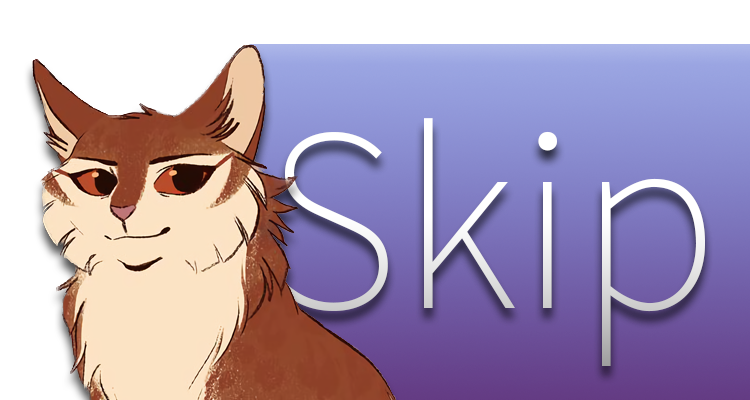
<style>
.page{position:relative;width:750px;height:400px;background:#ffffff}
.page>*{position:absolute;margin:0}
.t1{font:238.8px "NotoSansCJKkr-Thin";color:#f3f3f3}
</style>
<div class="page">
<p class="t1" style="left:275px;top:118px;width:430px;height:248px">Skip</p>
</div>
